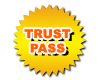
<style>
.page{position:relative;width:106px;height:80px;background:#ffffff}
.page>*{position:absolute;margin:0}
.t1{font:12px "Arial-Black";letter-spacing:0.02em;color:#ff6000}
</style>
<div class="page">
<p class="t1" style="left:24px;top:29px;width:47px;height:24px;text-align:center">TRUST<br>PASS</p>
</div>
